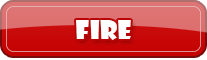
<style>
.page{position:relative;width:207px;height:60px}
.page>*{position:absolute;margin:0}
.t1{font:25px "ShowcardGothic-Reg";letter-spacing:0.025em;color:#ffffff}
</style>
<div class="page">
<p class="t1" style="left:76px;top:20px;width:55px;height:20px">Fire</p>
</div>
